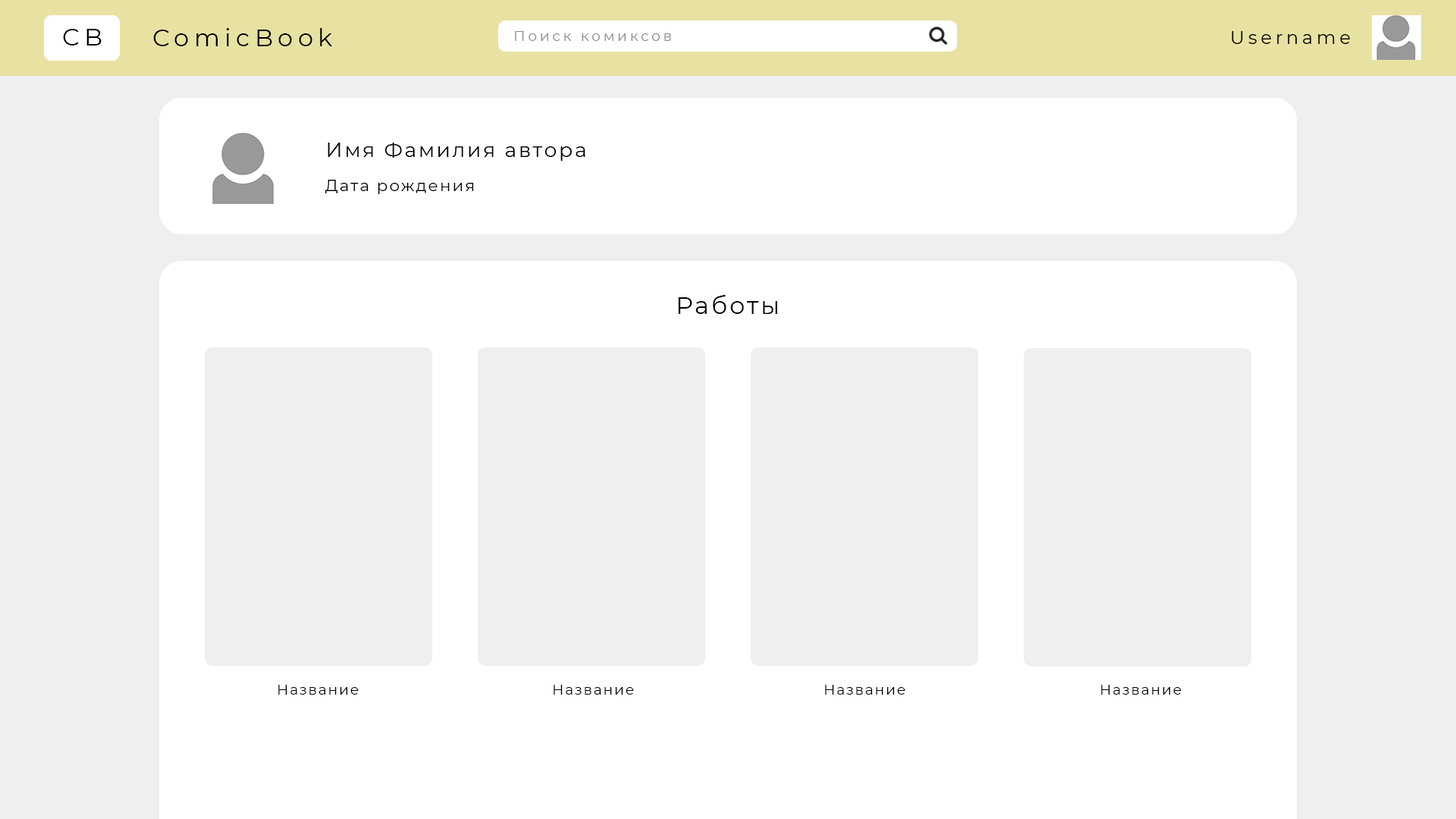
<style>
.page{position:relative;width:1456px;height:819px;background:#efefef}
.page>*{position:absolute;margin:0}
.t1{font:24.3px "Montserrat-Regular";letter-spacing:0.2em;color:#000000}
.t2{font:14.2px "Montserrat-Regular";letter-spacing:0.2em;color:#8d8d8d}
.t3{font:18.2px "Montserrat-Regular";letter-spacing:0.2em;color:#000000}
.t4{font:20.2px "Montserrat-Regular";letter-spacing:0.1em;color:#000000}
.t5{font:16.2px "Montserrat-Regular";letter-spacing:0.1em;color:#000000}
.t6{font:24.3px "Montserrat-Regular";letter-spacing:0.1em;color:#000000}
.t7{font:14.2px "Montserrat-Regular";letter-spacing:0.1em;color:#000000}
</style>
<div class="page">
<p class="t1" style="left:63px;top:29px;width:39px;height:16px">CB</p>
<p class="t1" style="left:153px;top:28px;width:179px;height:18px">ComicBook</p>
<p class="t2" style="left:515px;top:31px;width:156px;height:10px">Поиск комиксов</p>
<p class="t3" style="left:1232px;top:31px;width:118px;height:13px">Username</p>
<p class="t4" style="left:328px;top:143px;width:257px;height:18px">Имя Фамилия автора</p>
<p class="t5" style="left:325px;top:180px;width:149px;height:14px">Дата рождения</p>
<p class="t6" style="left:678px;top:294px;width:99px;height:20px">Работы</p>
<p class="t7" style="left:278px;top:685px;width:81px;height:10px">Название</p>
<p class="t7" style="left:554px;top:685px;width:80px;height:10px">Название</p>
<p class="t7" style="left:825px;top:685px;width:80px;height:10px">Название</p>
<p class="t7" style="left:1101px;top:685px;width:80px;height:10px">Название</p>
</div>
